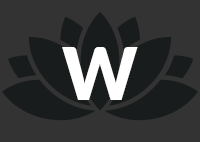
<style>
.page{position:relative;width:200px;height:142px;background:#333333}
.page>*{position:absolute;margin:0}
.t1{font:70.8px "Lato-Black";color:#ffffff}
</style>
<div class="page">
<p class="t1" style="left:62px;top:47px;width:76px;height:53px">W</p>
</div>
